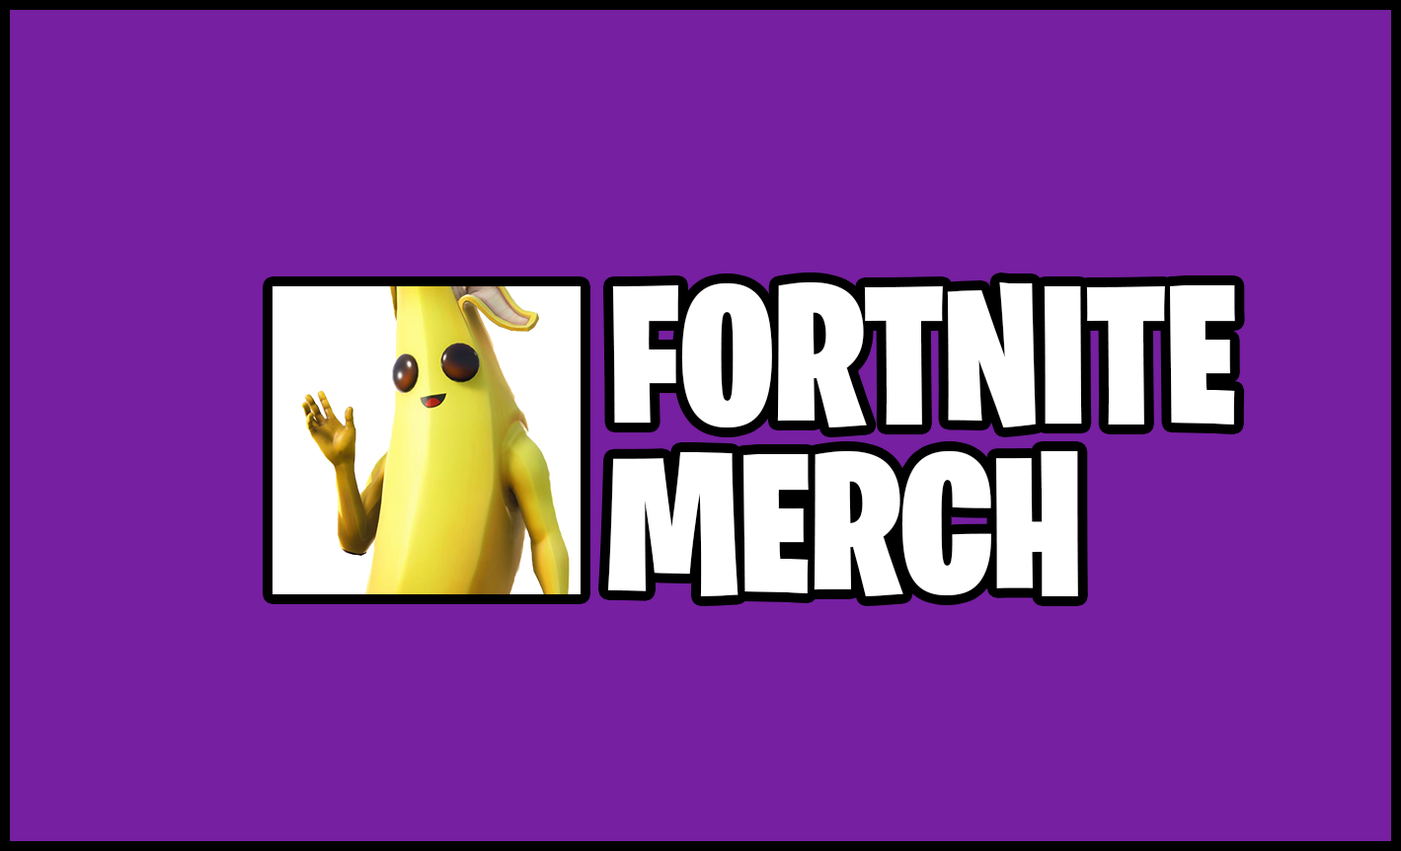
<style>
.page{position:relative;width:1401px;height:851px;background:#761fa1}
.page>*{position:absolute;margin:0}
.t1{font:197.5px "FORTNITEBATTLEFEST";color:#ffffff}
</style>
<div class="page">
<p class="t1" style="left:612px;top:282px;width:623px;height:146px">FORTNITE</p>
<p class="t1" style="left:608px;top:451px;width:470px;height:145px">MERCH</p>
</div>
